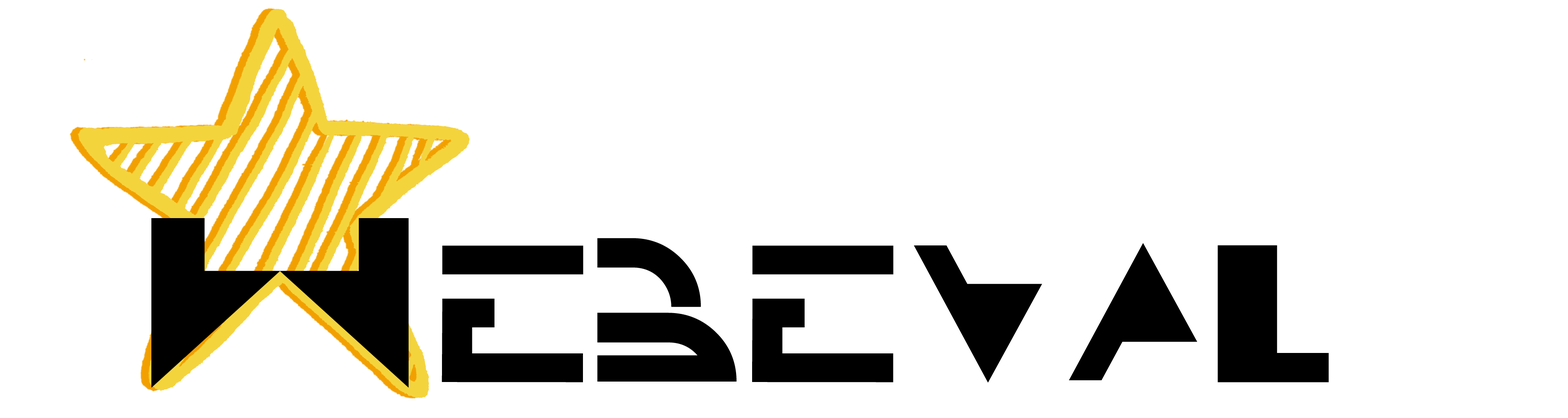
<style>
.page{position:relative;width:1568px;height:418px;background:#ffffff}
.page>*{position:absolute;margin:0}
.t1{font:141px "TRON";color:#000000}
</style>
<div class="page">
<p class="t1" style="left:442px;top:238px;width:887px;height:145px">ebeval</p>
</div>
